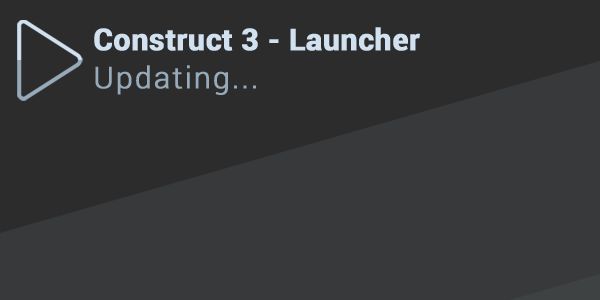
<style>
.page{position:relative;width:600px;height:300px;background:#37393a}
.page>*{position:absolute;margin:0}
.t1{font:30px/38px "Roboto-Bold";color:#d2e1f0;font-weight:bold}
.t2{font:30px/38px "Roboto-Light";letter-spacing:0.05em;color:#96aab9;font-weight:bold}
</style>
<div class="page">
<p class="t1" style="left:94px;top:27px;width:326px;height:68px">Construct 3 - Launcher<br><span class="t2">Updating...</span></p>
</div>
